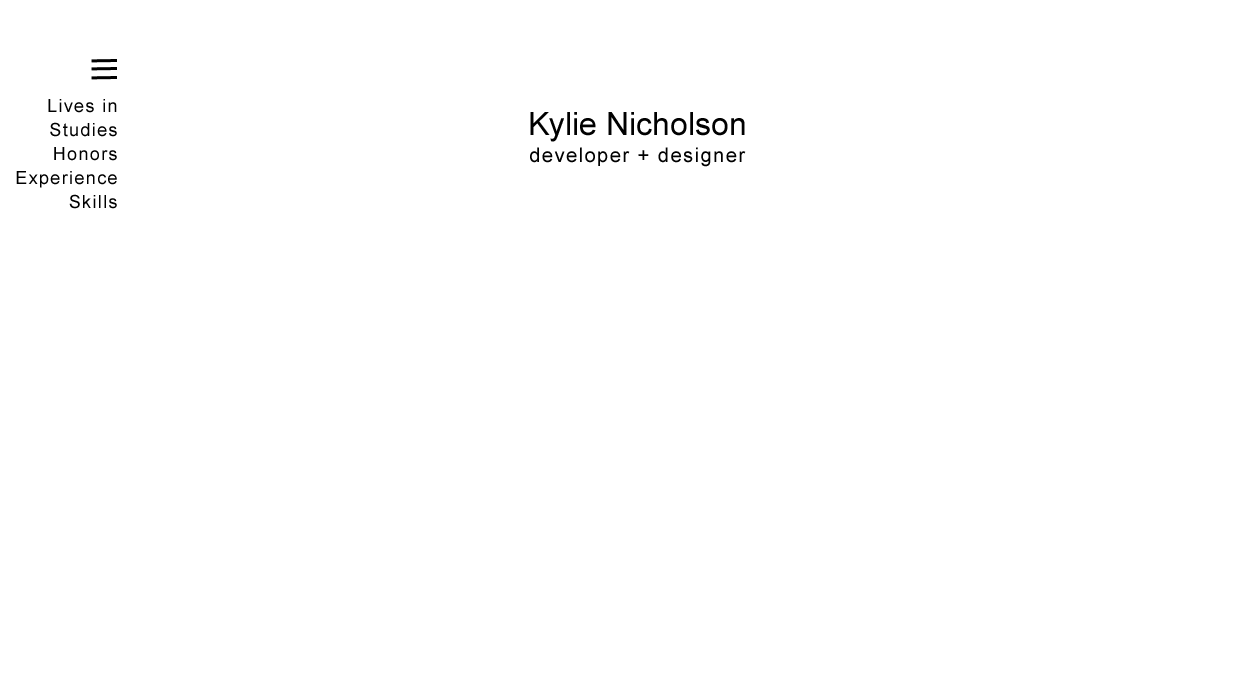
<style>
.page{position:relative;width:1242px;height:693px;background:#ffffff}
.page>*{position:absolute;margin:0}
.t1{font:18px/24px "ArialMT";letter-spacing:0.075em;color:#000000}
.t2{font:32px "ArialMT";color:#000000}
.t3{font:20px "ArialMT";letter-spacing:0.075em;color:#000000}
</style>
<div class="page">
<p class="t1" style="left:16px;top:99px;width:101px;height:110px;text-align:right">Lives in<br>Studies<br>Honors<br>Experience<br>Skills</p>
<p class="t2" style="left:530px;top:112px;width:215px;height:30px">Kylie Nicholson</p>
<p class="t3" style="left:530px;top:147px;width:216px;height:20px">developer + designer</p>
</div>
